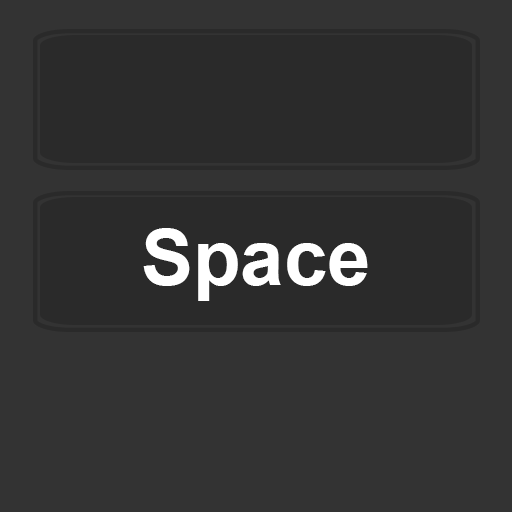
<style>
.page{position:relative;width:512px;height:512px;background:#333333}
.page>*{position:absolute;margin:0}
.t1{font:77.8px "Arial-BoldMT";color:#ffffff}
</style>
<div class="page">
<p class="t1" style="left:143px;top:228px;width:225px;height:73px">Space</p>
</div>
